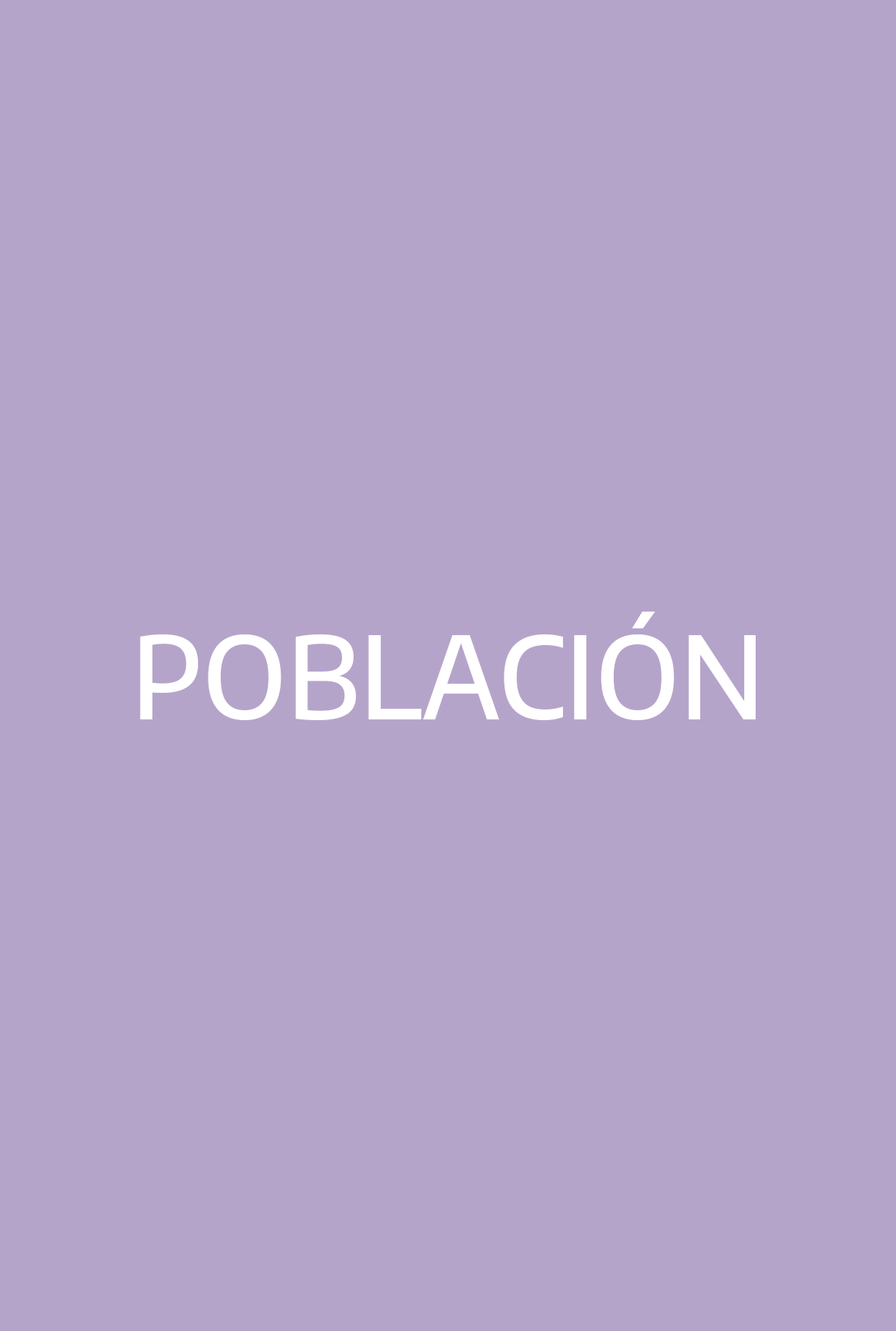
<style>
.page{position:relative;width:896px;height:1331px;background:#b5a4ca}
.page>*{position:absolute;margin:0}
.t1{font:113.8px "EncodeSans-Medium";color:#ffffff;text-transform:uppercase}
</style>
<div class="page">
<p class="t1" style="left:140px;top:611px;width:616px;height:109px">POBLACIÓN</p>
</div>
